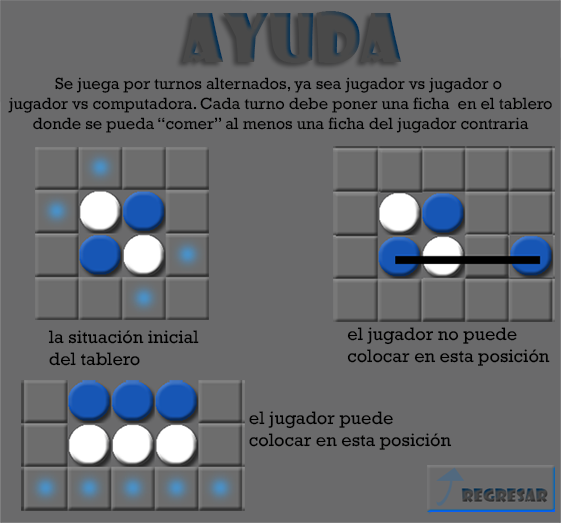
<style>
.page{position:relative;width:561px;height:523px;background:#6a6a6b}
.page>*{position:absolute;margin:0}
.t1{font:65.4px "ShowcardGothic-Reg";color:#494949}
.t2{font:16.4px "Rockwell";color:#000000}
.t3{font:18.2px "Rockwell";color:#000000}
</style>
<div class="page">
<p class="t1" style="left:182px;top:11px;width:220px;height:52px">ayuda</p>
<p class="t2" style="left:8px;top:77px;width:544px;height:56px;text-align:center">Se juega por turnos alternados, ya sea jugador vs jugador o <br>jugador vs computadora. Cada turno debe poner una ficha  en el tablero<br>donde se pueda “comer” al menos una ficha del jugador contraria</p>
<p class="t3" style="left:347px;top:327px;width:203px;height:39px">el jugador no puede <br>colocar en esta posición</p>
<p class="t3" style="left:48px;top:330px;width:151px;height:36px">la situación inicial <br>del tablero</p>
<p class="t3" style="left:249px;top:411px;width:203px;height:39px">el jugador puede <br>colocar en esta posición</p>
</div>
